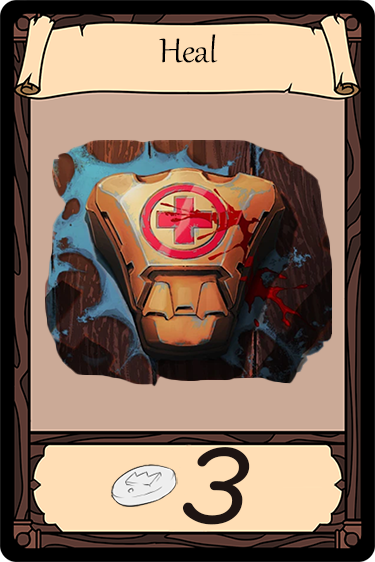
<style>
.page{position:relative;width:375px;height:562px}
.page>*{position:absolute;margin:0}
.t1{font:41.7px "Gabriola";color:#000000}
.t2{font:108.1px "MVBoli";color:#1e1412}
</style>
<div class="page">
<p class="t1" style="left:159px;top:34px;width:59px;height:29px">Heal</p>
<p class="t2" style="left:182px;top:447px;width:68px;height:78px">3</p>
</div>
